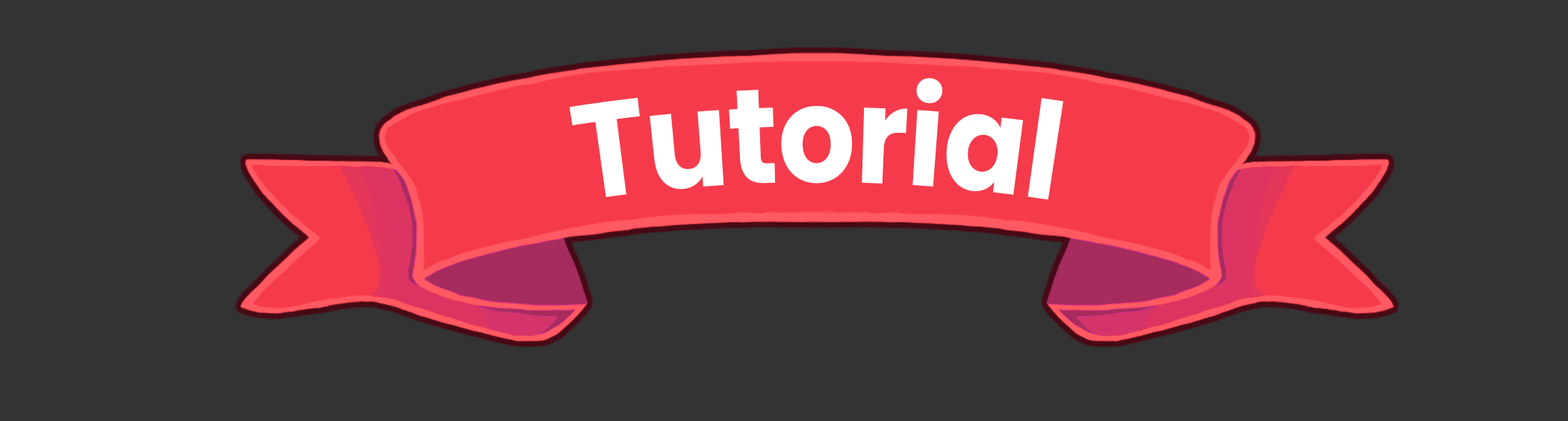
<style>
.page{position:relative;width:1568px;height:421px;background:#333333}
.page>*{position:absolute;margin:0}
.t1{font:134.4px "Poppins-Bold";color:#ffffff;scale:0.83 1}
</style>
<div class="page">
<p class="t1" style="left:569px;top:78px;width:494px;height:122px">Tutorial</p>
</div>
